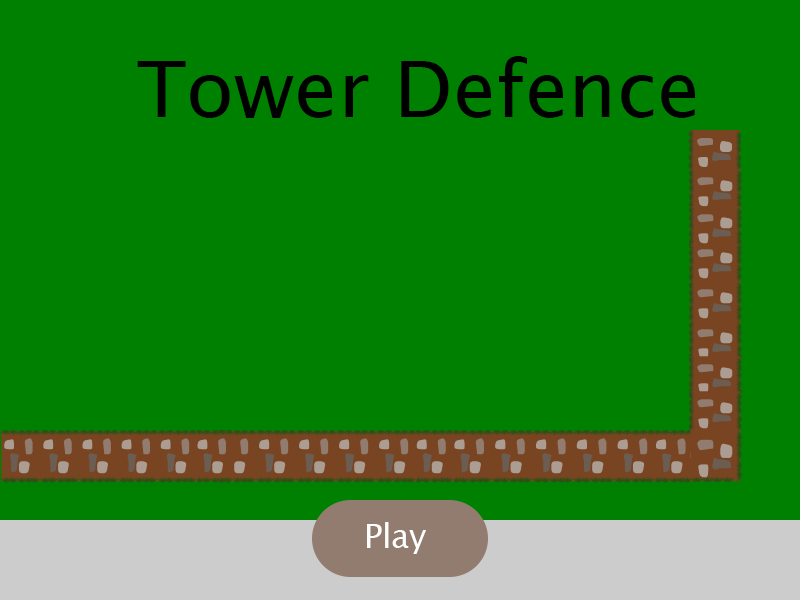
<style>
.page{position:relative;width:800px;height:600px;background:#008000}
.page>*{position:absolute;margin:0}
.t1{font:78px "LucidaGrande";color:#000000}
.t2{font:32.5px "LucidaGrande";color:#ffffff}
</style>
<div class="page">
<p class="t1" style="left:137px;top:56px;width:558px;height:62px">Tower Defence</p>
<p class="t2" style="left:367px;top:522px;width:59px;height:32px">Play</p>
</div>
